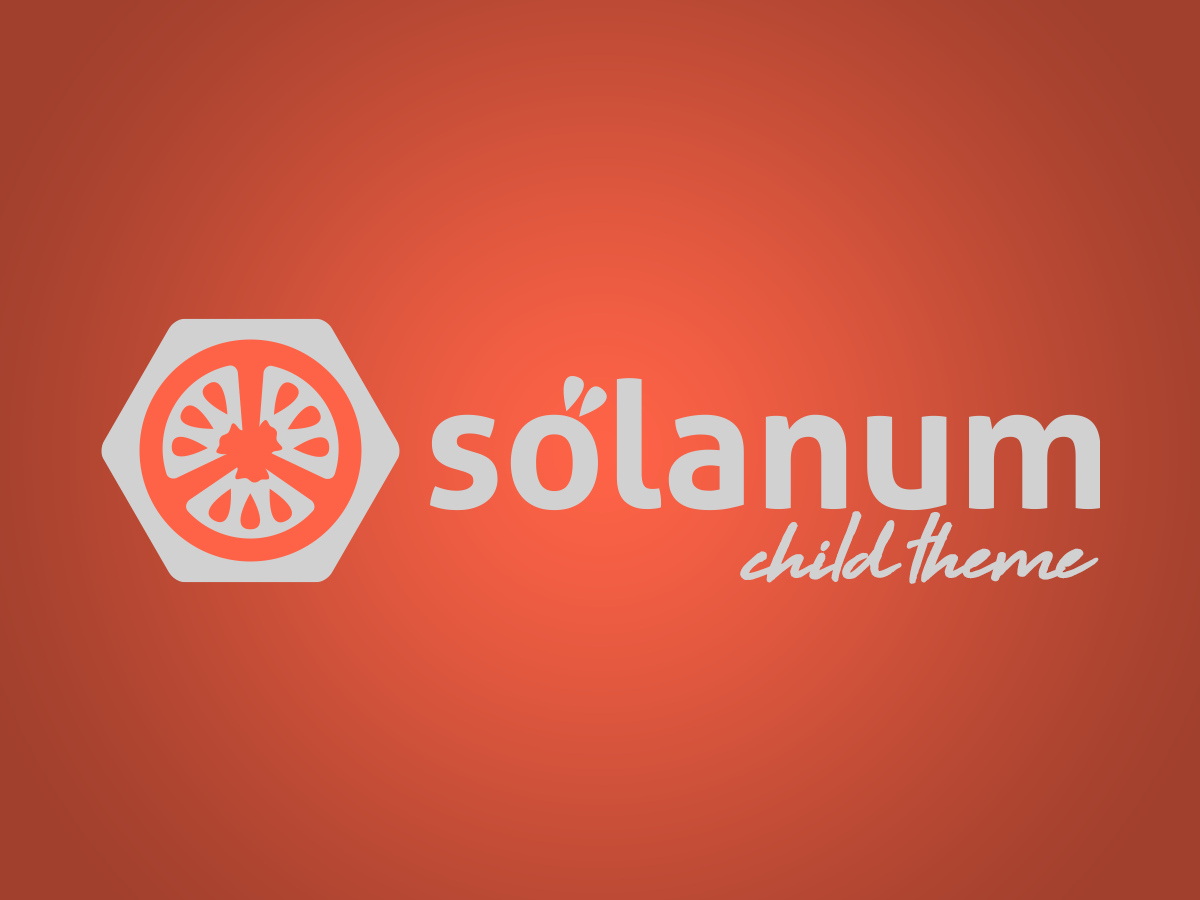
<style>
.page{position:relative;width:1200px;height:900px}
.page>*{position:absolute;margin:0}
.t1{font:106.2px "HighTide";letter-spacing:-0.05em;color:#d1d1d1;font-weight:bold}
</style>
<div class="page">
<p class="t1" style="left:740px;top:511px;width:359px;height:73px">child theme</p>
</div>
